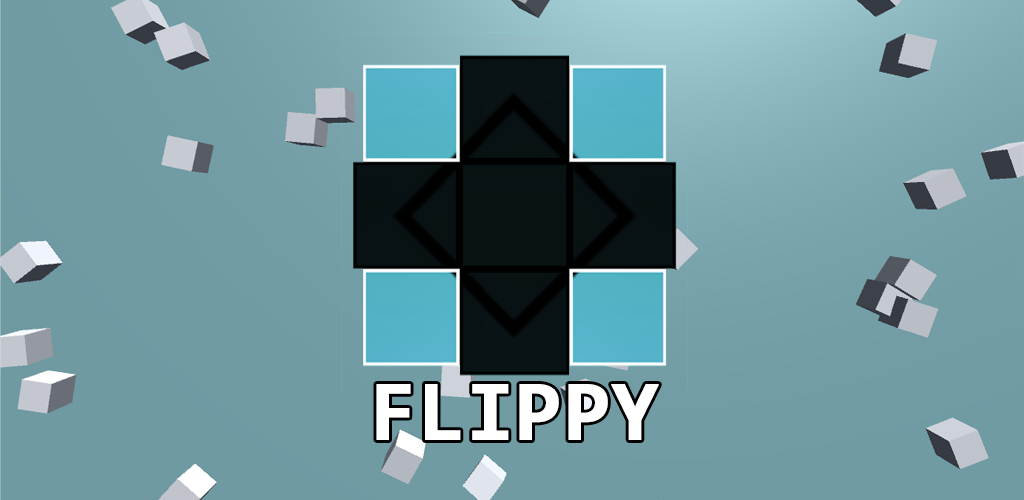
<style>
.page{position:relative;width:1024px;height:500px}
.page>*{position:absolute;margin:0}
.t1{font:86px "Consolas-Bold";color:#ffffff;font-variant:small-caps;font-weight:bold}
</style>
<div class="page">
<p class="t1" style="left:376px;top:384px;width:283px;height:56px">FLIPPY</p>
</div>
